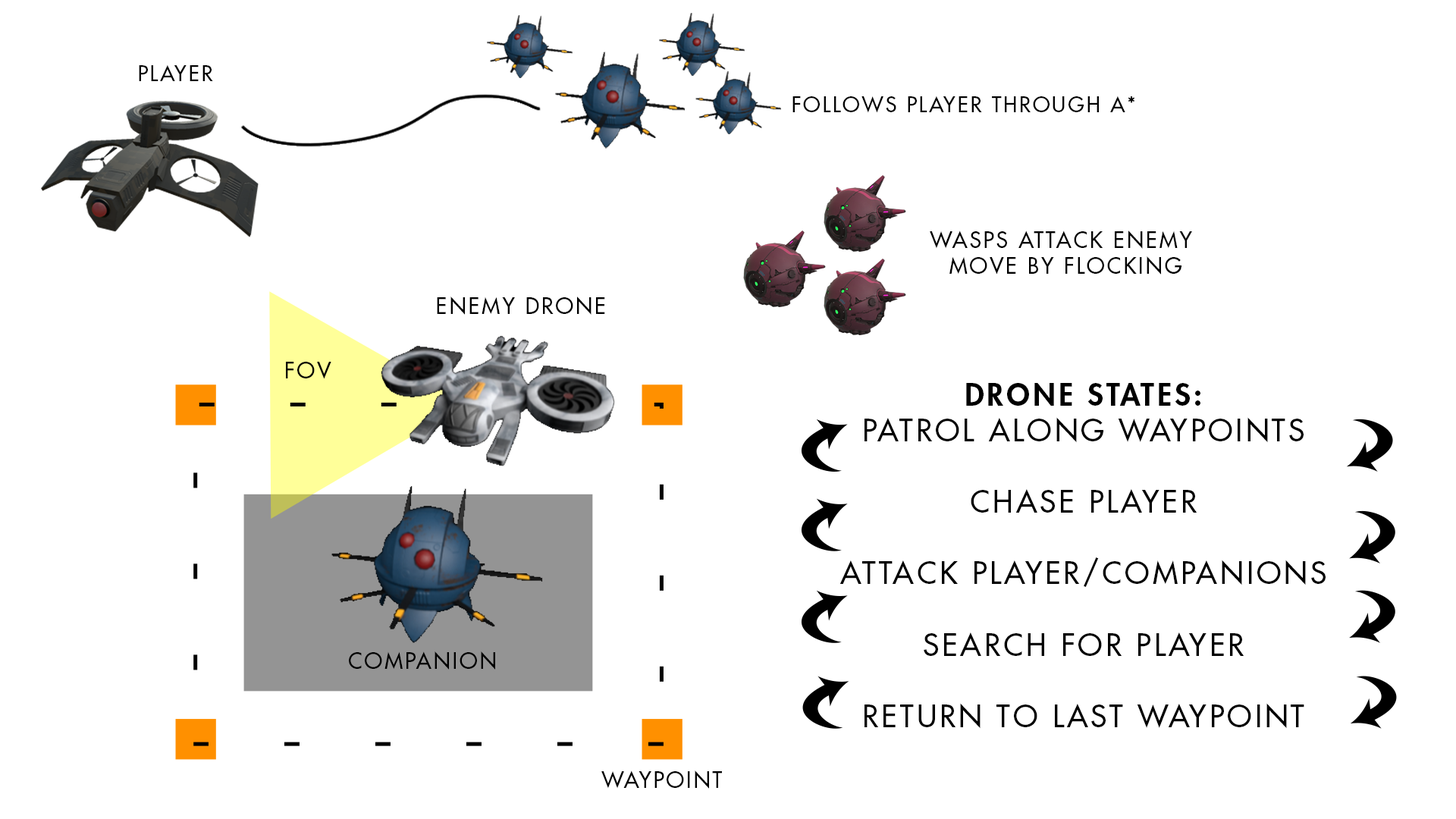
<style>
.page{position:relative;width:1456px;height:819px;background:#ffffff}
.page>*{position:absolute;margin:0}
.t1{font:20.7px "FuturaStd-Medium";letter-spacing:0.1em;color:#000000;text-transform:uppercase}
.t2{font:21.6px "FuturaStd-Medium";letter-spacing:0.1em;color:#000000;text-transform:uppercase}
.t3{font:29.8px "FuturaStd-Medium";letter-spacing:0.1em;color:#000000;text-transform:uppercase}
.t4{font:29.8px "FuturaStd-Heavy";letter-spacing:0.1em;color:#000000;text-transform:uppercase}
</style>
<div class="page">
<p class="t1" style="left:139px;top:64px;width:74px;height:17px">Player</p>
<p class="t1" style="left:792px;top:96px;width:343px;height:17px">Follows player through A*</p>
<p class="t2" style="left:930px;top:231px;width:262px;height:44px;text-align:center">Wasps attack Enemy <br>move by flocking</p>
<p class="t2" style="left:437px;top:297px;width:168px;height:18px">Enemy Drone</p>
<p class="t2" style="left:286px;top:362px;width:45px;height:17px">FOV</p>
<p class="t3" style="left:839px;top:383px;width:487px;height:346px;text-align:center"><span class="t4">Drone States:<br></span>patrol Along Waypoints<br><br>Chase Player<br><br>Attack Player/Companions<br><br>Search For Player<br><br>Return to last Waypoint</p>
<p class="t2" style="left:349px;top:651px;width:146px;height:19px">companion</p>
<p class="t2" style="left:601px;top:770px;width:121px;height:19px">Waypoint</p>
</div>
